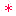
<style>
.page{position:relative;width:16px;height:16px;background:#ffffff}
.page>*{position:absolute;margin:0}
.t1{font:18px "SimSun";color:#ff0048}
</style>
<div class="page">
<p class="t1" style="left:5px;top:4px;width:7px;height:8px">*</p>
</div>
